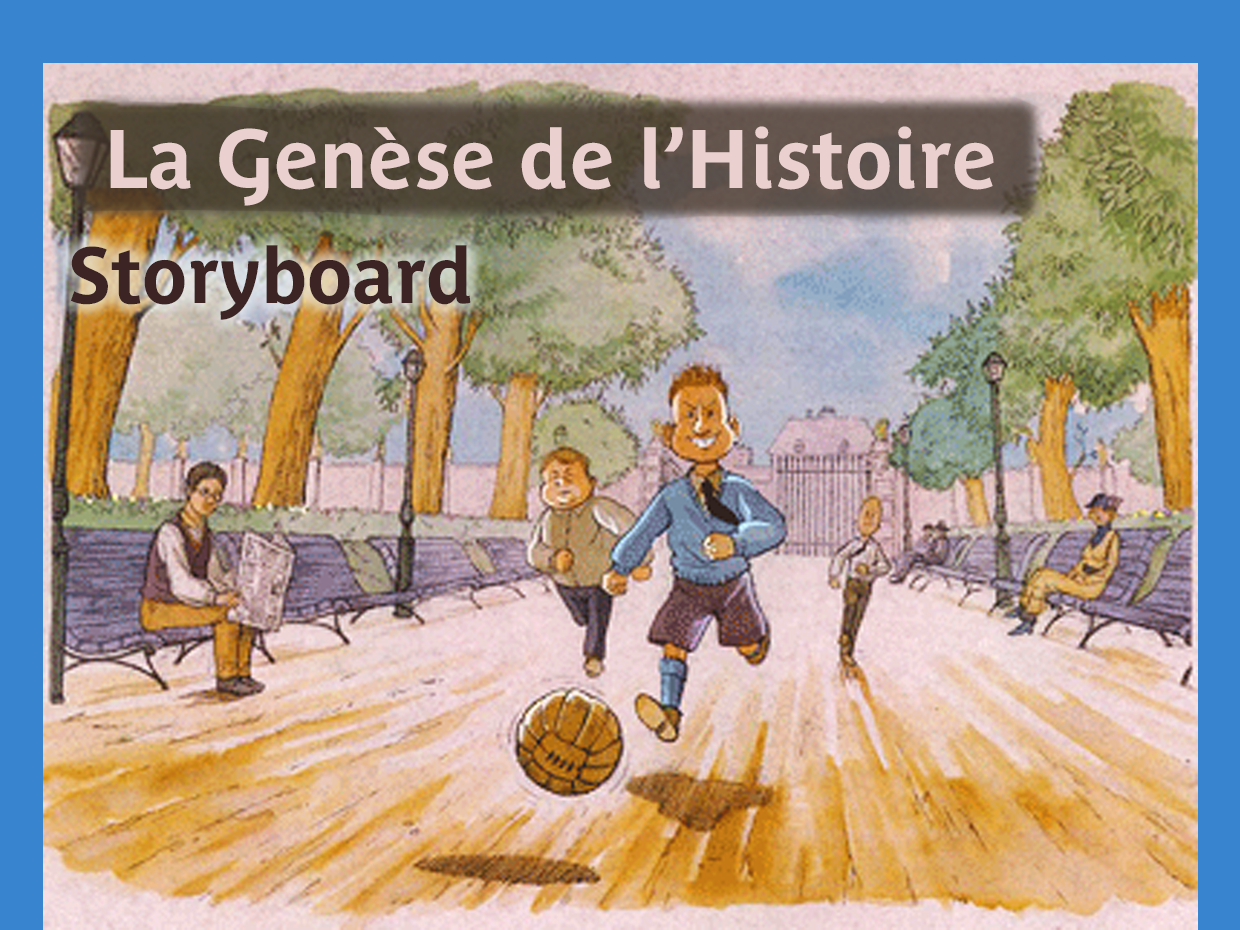
<style>
.page{position:relative;width:1240px;height:930px}
.page>*{position:absolute;margin:0}
.t1{font:82px "ParisinePlusStd-Bold";color:#ead1d0}
.t2{font:78px "ParisinePlusStd-Bold";color:#3b2423}
</style>
<div class="page">
<p class="t1" style="left:110px;top:126px;width:884px;height:80px">La Genèse de l’Histoire</p>
<p class="t2" style="left:71px;top:245px;width:400px;height:75px">Storyboard</p>
</div>
